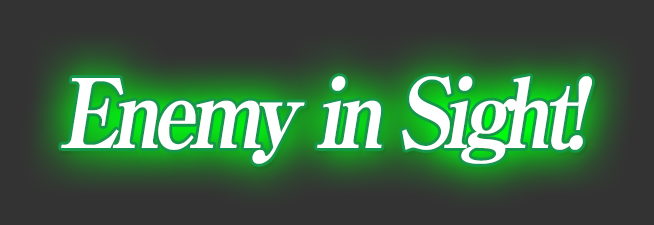
<style>
.page{position:relative;width:654px;height:225px;background:#333333}
.page>*{position:absolute;margin:0}
.t1{font:96px "RyuminPro-ExBold";letter-spacing:-0.08em;color:#ffffff;font-style:italic;scale:0.9 1}
</style>
<div class="page">
<p class="t1" style="left:61px;top:76px;width:531px;height:88px">Enemy in Sight!</p>
</div>
